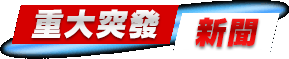
<style>
.page{position:relative;width:289px;height:59px;background:#ffffff}
.page>*{position:absolute;margin:0}
.t1{font:32px "RodinPro-EB";font-style:italic}
</style>
<div class="page">
<p class="t1" style="left:31px;top:9px;width:129px;height:30px">重大突發</p>
<p class="t1" style="left:195px;top:17px;width:64px;height:30px">新聞</p>
</div>
